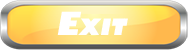
<style>
.page{position:relative;width:188px;height:50px}
.page>*{position:absolute;margin:0}
.t1{font:22px "GillSans-UltraBold";color:#ffffff;font-style:italic}
.t2{font:31.4px "GillSans-UltraBold";color:#ffffff;font-style:italic}
</style>
<div class="page">
<p class="t1" style="left:57px;top:11px;width:71px;height:24px"><span class="t2">E</span>XIT</p>
</div>
